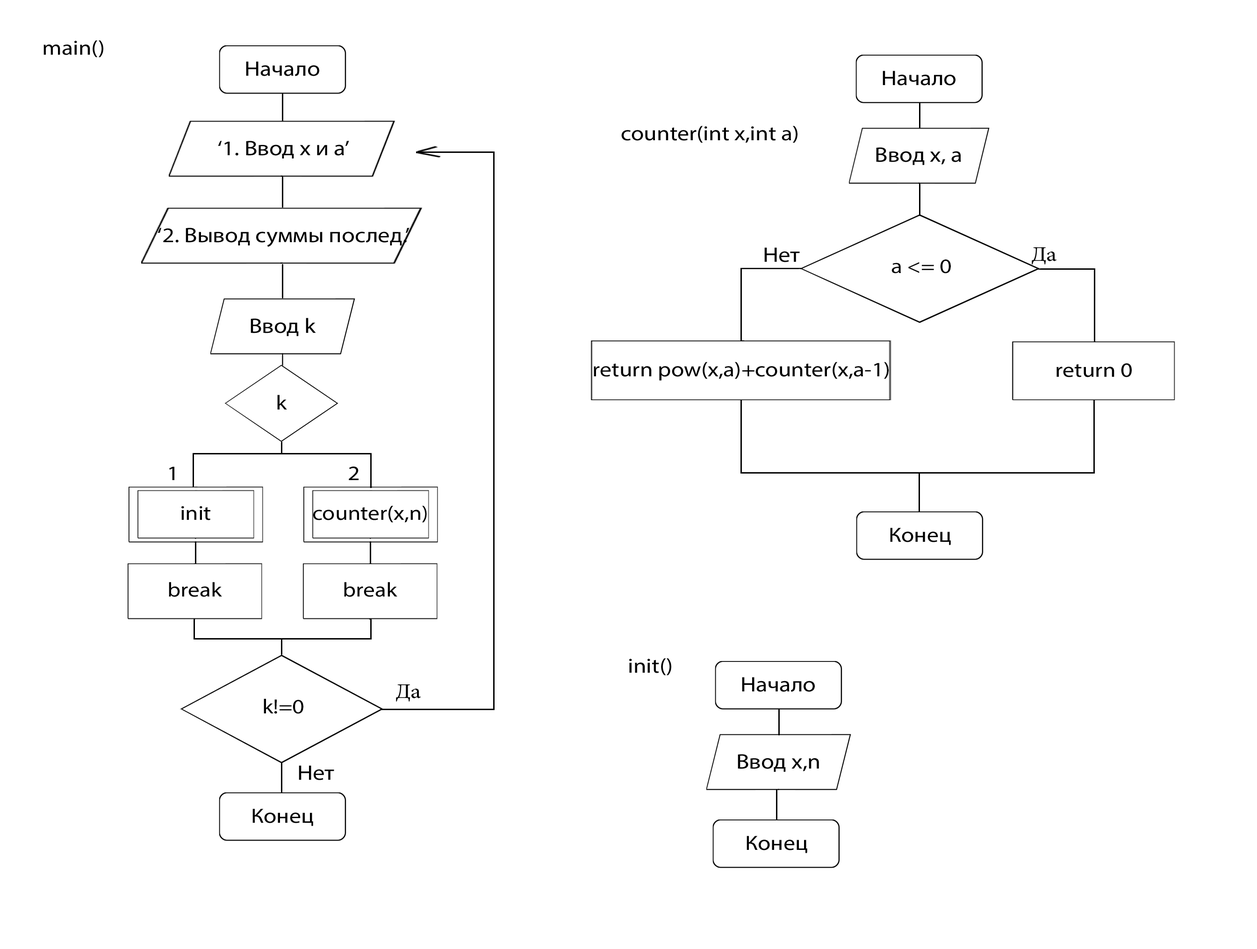
<style>
.page{position:relative;width:1257px;height:949px;background:#ffffff}
.page>*{position:absolute;margin:0}
.t1{font:20.6px "MyriadPro-Regular";color:#000000;scale:1.14 1}
.t2{font:20.9px "MyriadPro-Regular";color:#000000;scale:1.14 1}
.t3{font:21px "MyriadPro-Regular";color:#000000;scale:1.13 1}
.t4{font:20.2px "MyriadPro-Regular";color:#000000;scale:1.15 1}
.t5{font:20.3px "MyriadPro-Regular";color:#000000;scale:1.14 1}
</style>
<div class="page">
<p class="t1" style="left:43px;top:40px;width:60px;height:17px">main()</p>
<p class="t2" style="left:246px;top:61px;width:73px;height:15px">Начало</p>
<p class="t2" style="left:882px;top:71px;width:73px;height:15px">Начало</p>
<p class="t1" style="left:621px;top:126px;width:176px;height:17px">counter(int x,int a)</p>
<p class="t2" style="left:218px;top:141px;width:131px;height:17px">‘1. Ввод x и a’</p>
<p class="t2" style="left:876px;top:147px;width:85px;height:18px">Ввод x, a</p>
<p class="t2" style="left:158px;top:228px;width:251px;height:19px">‘2. Вывод суммы послед.’</p>
<p class="t3" style="left:764px;top:247px;width:36px;height:15px">Нет</p>
<p class="t1" style="left:891px;top:259px;width:60px;height:14px">a &lt;= 0</p>
<p class="t2" style="left:251px;top:318px;width:65px;height:18px">Ввод k</p>
<p class="t1" style="left:594px;top:362px;width:294px;height:18px">return pow(x,a)+counter(x,a-1)</p>
<p class="t4" style="left:1056px;top:363px;width:76px;height:14px">return 0</p>
<p class="t1" style="left:277px;top:394px;width:10px;height:15px">k</p>
<p class="t1" style="left:169px;top:466px;width:5px;height:14px">1</p>
<p class="t1" style="left:349px;top:466px;width:9px;height:14px">2</p>
<p class="t5" style="left:181px;top:506px;width:29px;height:14px">init</p>
<p class="t5" style="left:313px;top:505px;width:114px;height:18px">counter(x,n)</p>
<p class="t1" style="left:890px;top:528px;width:61px;height:17px">Конец</p>
<p class="t5" style="left:169px;top:582px;width:53px;height:15px">break</p>
<p class="t5" style="left:344px;top:582px;width:53px;height:15px">break</p>
<p class="t1" style="left:629px;top:658px;width:42px;height:17px">init()</p>
<p class="t2" style="left:742px;top:677px;width:73px;height:15px">Начало</p>
<p class="t1" style="left:264px;top:698px;width:39px;height:16px">k!=0</p>
<p class="t2" style="left:738px;top:754px;width:81px;height:18px">Ввод x,n</p>
<p class="t3" style="left:299px;top:765px;width:35px;height:15px">Нет</p>
<p class="t1" style="left:252px;top:809px;width:61px;height:17px">Конец</p>
<p class="t1" style="left:746px;top:836px;width:61px;height:17px">Конец</p>
</div>
